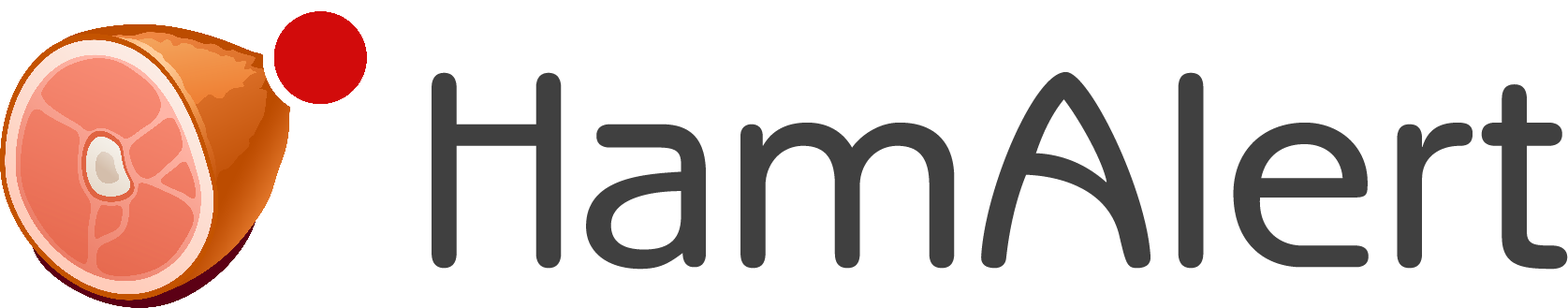
<style>
.page{position:relative;width:1568px;height:308px;background:#ffffff}
.page>*{position:absolute;margin:0}
.t1{font:280.8px "BenguiatGothic-Medium";color:#404040}
</style>
<div class="page">
<p class="t1" style="left:432px;top:72px;width:1136px;height:198px">HamAlert</p>
</div>
